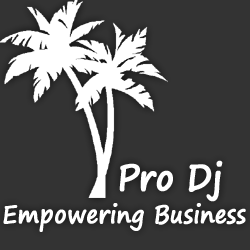
<style>
.page{position:relative;width:250px;height:250px;background:#333333}
.page>*{position:absolute;margin:0}
.t1{font:36.3px "SegoePrint-Bold";color:#ffffff;font-weight:bold;scale:0.85 1}
.t2{font:25.3px "SegoePrint-Bold";color:#ffffff;font-weight:bold;scale:0.85 1}
</style>
<div class="page">
<p class="t1" style="left:119px;top:160px;width:104px;height:42px">Pro Dj</p>
<p class="t2" style="left:3px;top:203px;width:243px;height:29px">Empowering Business</p>
</div>
